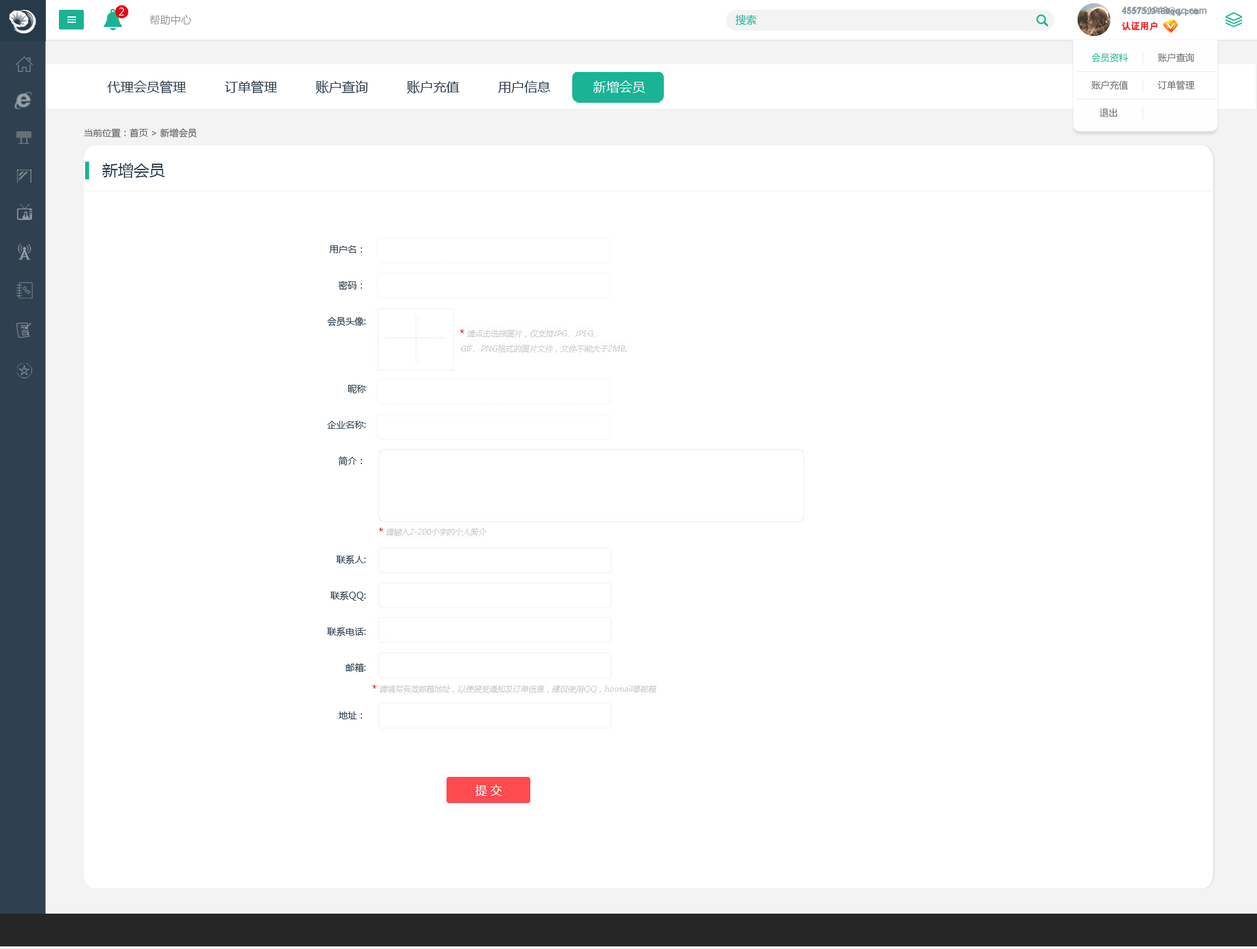
<style>
.page{position:relative;width:1257px;height:949px;background:#ffffff}
.page>*{position:absolute;margin:0}
.t1{font:10.5px "MicrosoftYaHei";color:#ffffff}
.t2{font:10.5px "MicrosoftYaHei";color:#999999}
.t3{font:10.5px "MicrosoftYaHei";color:#1ab394}
.t4{font:9.2px/15.7px "AdobeHeitiStd-Regular";color:#999999}
.t5{font:9.2px/15.7px "AdobeHeitiStd-Regular";color:#f61e1e}
.t6{font:9.2px/15.7px "AdobeHeitiStd-Regular";color:#ffffff}
.t7{font:9.2px/15.7px "SimSun";color:#8894a4;font-weight:bold}
.t8{font:9.2px/15.7px "SimSun";color:#f61e1e}
.t9{font:9.2px/27.5px "MicrosoftYaHei";color:#666666}
.t10{font:9.2px/27.5px "MicrosoftYaHei";color:#1ab394}
.t11{font:13.1px "MicrosoftYaHei";color:#2f4050}
.t12{font:13.1px "MicrosoftYaHei";color:#ffffff}
.t13{font:9.2px "MicrosoftYaHei";color:#666666}
.t14{font:15.7px "MicrosoftYaHei";color:#2f4050}
.t15{font:9.2px/36px "MicrosoftYaHei";color:#2f4050}
</style>
<div class="page">
<p class="t1" style="left:118px;top:7px;width:6px;height:9px">2</p>
<p class="t2" style="left:150px;top:14px;width:42px;height:12px">帮助中心</p>
<p class="t3" style="left:735px;top:14px;width:22px;height:12px">搜索</p>
<p class="t4" style="left:1121px;top:7px;width:85px;height:24px">455751948@qq.com<br><span class="t5">认证用户               </span><span class="t6">退出</span></p>
<p class="t7" style="left:1121px;top:7px;width:78px;height:24px">455751948@qq.com<br><span class="t8">认证用户</span></p>
<p class="t9" style="left:1091px;top:53px;width:103px;height:64px"><span class="t10">会员资料</span>           账户查询<br>账户充值           订单管理           <br>   退出</p>
<p class="t11" style="left:107px;top:80px;width:538px;height:14px">代理会员管理          订单管理          账户查询          账户充值          用户信息           <span class="t12">新增会员</span></p>
<p class="t13" style="left:84px;top:128px;width:113px;height:10px">当前位置：首页 &gt; 新增会员</p>
<p class="t14" style="left:102px;top:163px;width:63px;height:15px">新增会员</p>
<p class="t15" style="left:327px;top:245px;width:39px;height:474px;text-align:right">用户名：<br>密码：<br>会员头像:<br><br>昵称<br>企业名称:<br>简介：<br><br><br>联系人:<br>联系QQ:<br>联系电话:<br>邮箱:<br><br>地址：</p>
</div>
